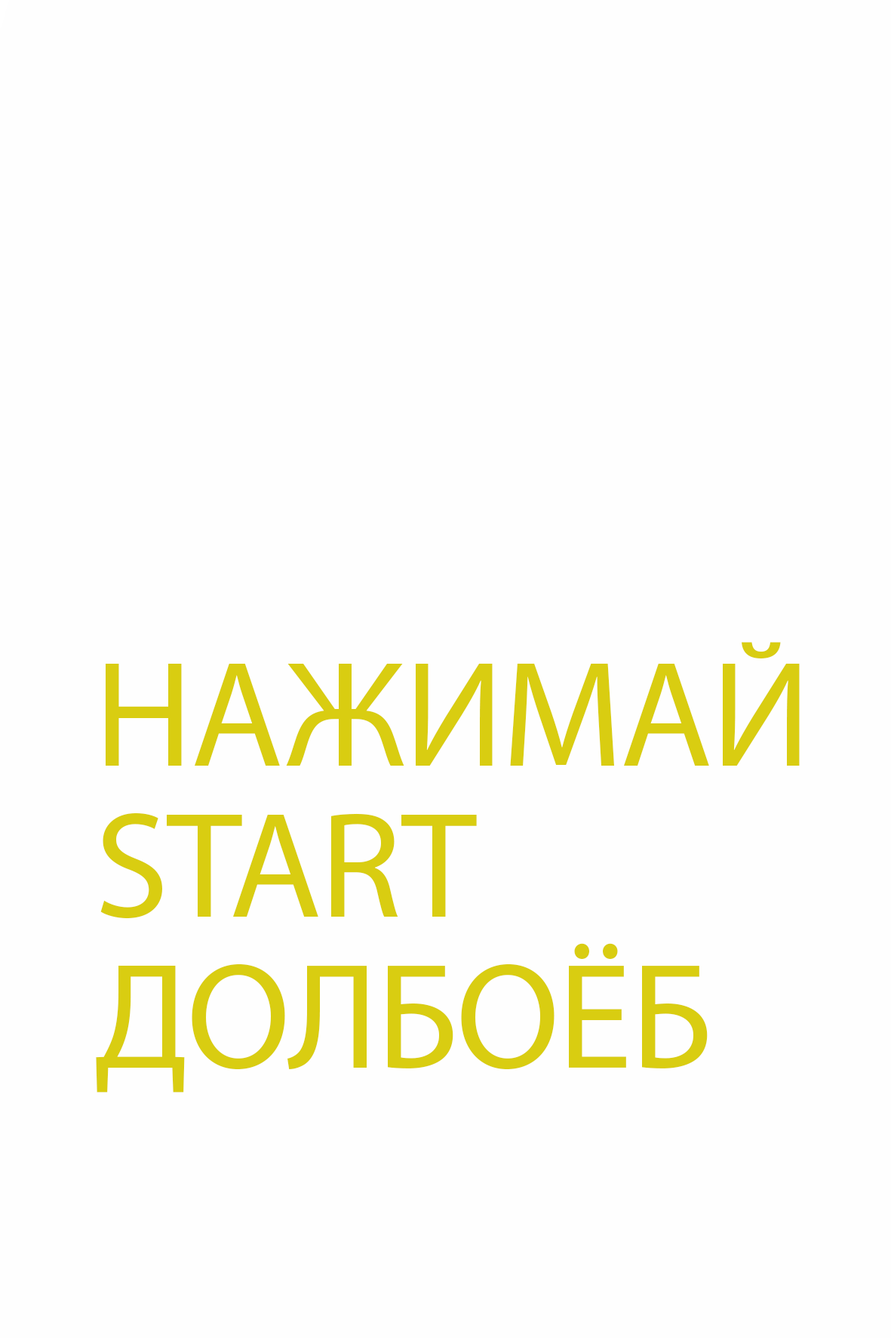
<style>
.page{position:relative;width:891px;height:1338px;background:#fefefe}
.page>*{position:absolute;margin:0}
.t1{font:151px/151px "MyriadPro-Regular";letter-spacing:-0.01em;color:#d9cd11}
</style>
<div class="page">
<p class="t1" style="left:96px;top:642px;width:704px;height:450px">НАЖИМАЙ<br>START<br>ДОЛБОЁБ</p>
</div>
